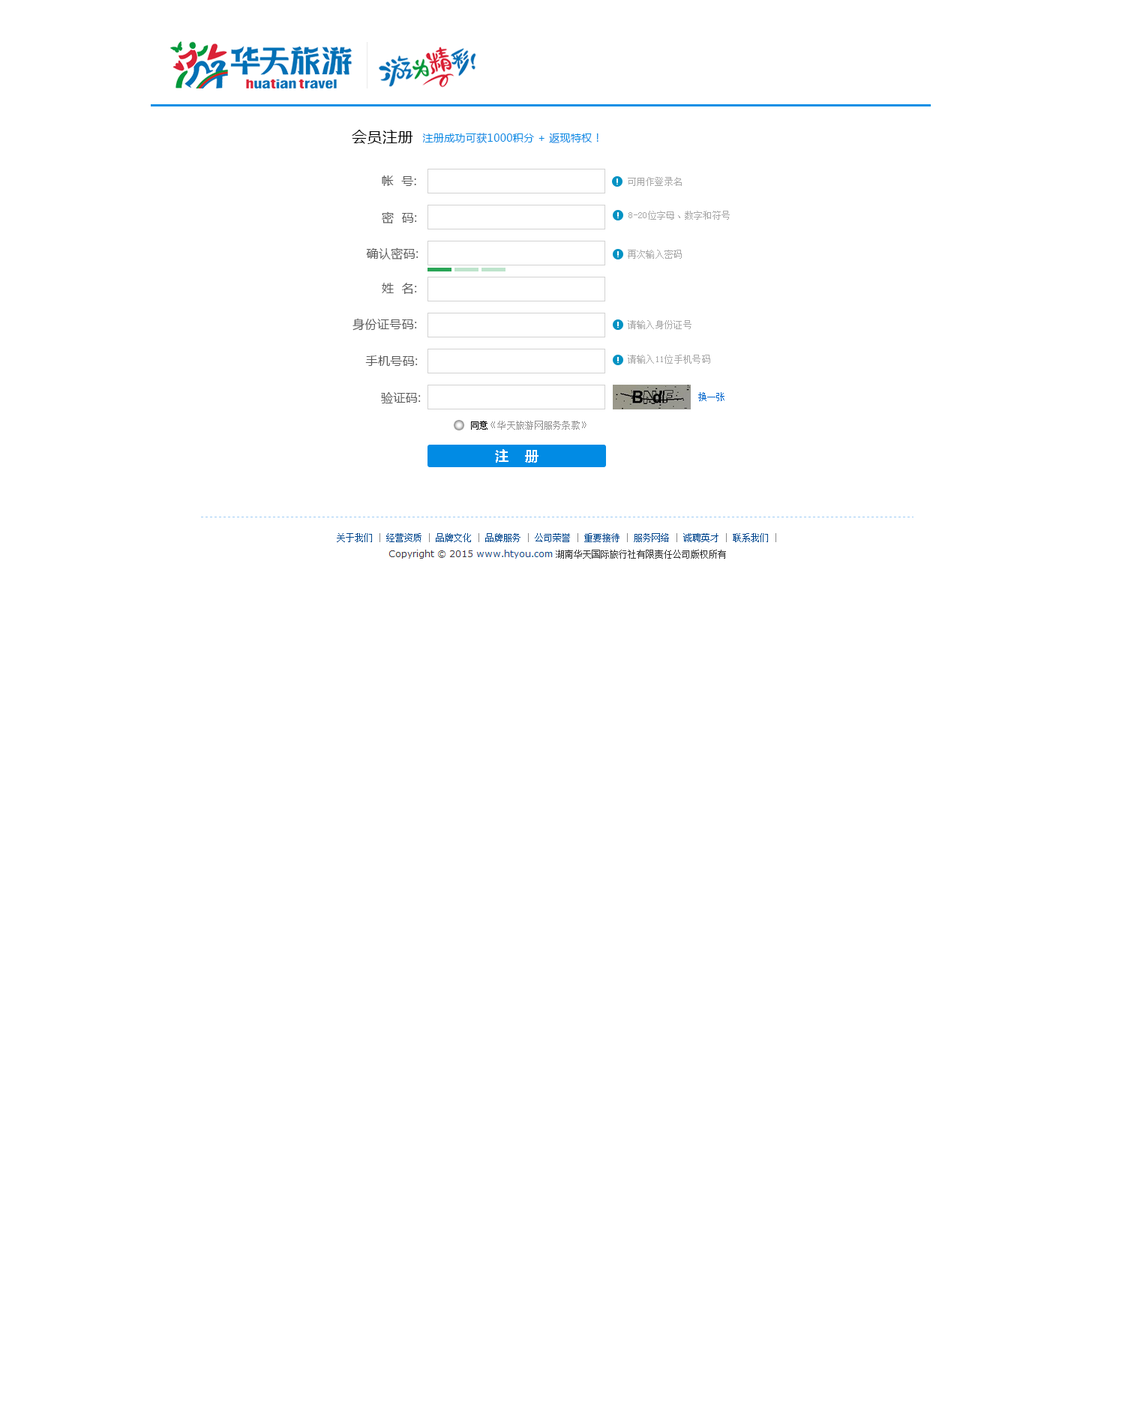
<style>
.page{position:relative;width:1125px;height:1421px;background:#ffffff}
.page>*{position:absolute;margin:0}
.t1{font:15px "MicrosoftYaHei";letter-spacing:0.025em;color:#000000}
.t2{font:10.5px "MicrosoftYaHei";letter-spacing:0.025em;color:#018be4}
.t3{font:12px "MicrosoftYaHei";letter-spacing:0.025em;color:#5a5a5a}
.t4{font:9px "SimSun";letter-spacing:0.025em;color:#ffffff;font-weight:bold}
.t5{font:9px "SimSun";letter-spacing:0.025em;color:#a7a7a7}
.t6{font:9px "SimSun";letter-spacing:0.025em;color:#000000}
.t7{font:9px "SimSun";letter-spacing:0.025em;color:#8f8e8e}
.t8{font:13.5px "MicrosoftYaHei-Bold";letter-spacing:0.025em;color:#ffffff}
</style>
<div class="page">
<p class="t1" style="left:352px;top:130px;width:61px;height:14px">会员注册</p>
<p class="t2" style="left:422px;top:133px;width:176px;height:10px">注册成功可获1000积分 + 返现特权！</p>
<p class="t3" style="left:382px;top:176px;width:34px;height:10px">帐  号:</p>
<p class="t4" style="left:616px;top:178px;width:2px;height:6px">!</p>
<p class="t5" style="left:628px;top:177px;width:54px;height:9px">可用作登录名</p>
<p class="t3" style="left:382px;top:212px;width:35px;height:12px">密  码:</p>
<p class="t4" style="left:617px;top:212px;width:2px;height:6px">!</p>
<p class="t5" style="left:628px;top:211px;width:102px;height:9px">8-20位字母、数字和符号</p>
<p class="t3" style="left:366px;top:248px;width:52px;height:12px">确认密码:</p>
<p class="t4" style="left:617px;top:251px;width:2px;height:6px">!</p>
<p class="t5" style="left:628px;top:250px;width:54px;height:9px">再次输入密码</p>
<p class="t3" style="left:382px;top:283px;width:35px;height:11px">姓  名:</p>
<p class="t3" style="left:352px;top:318px;width:65px;height:13px">身份证号码:</p>
<p class="t4" style="left:617px;top:322px;width:2px;height:6px">!</p>
<p class="t5" style="left:628px;top:320px;width:64px;height:9px">请输入身份证号</p>
<p class="t3" style="left:365px;top:356px;width:53px;height:10px">手机号码:</p>
<p class="t4" style="left:617px;top:357px;width:2px;height:6px">!</p>
<p class="t5" style="left:628px;top:355px;width:82px;height:9px">请输入11位手机号码</p>
<p class="t3" style="left:381px;top:392px;width:40px;height:12px">验证码:</p>
<p class="t6" style="left:471px;top:421px;width:17px;height:9px">同意</p>
<p class="t7" style="left:490px;top:421px;width:96px;height:9px">《华天旅游网服务条款》</p>
<p class="t8" style="left:495px;top:449px;width:43px;height:14px">注    册</p>
</div>
